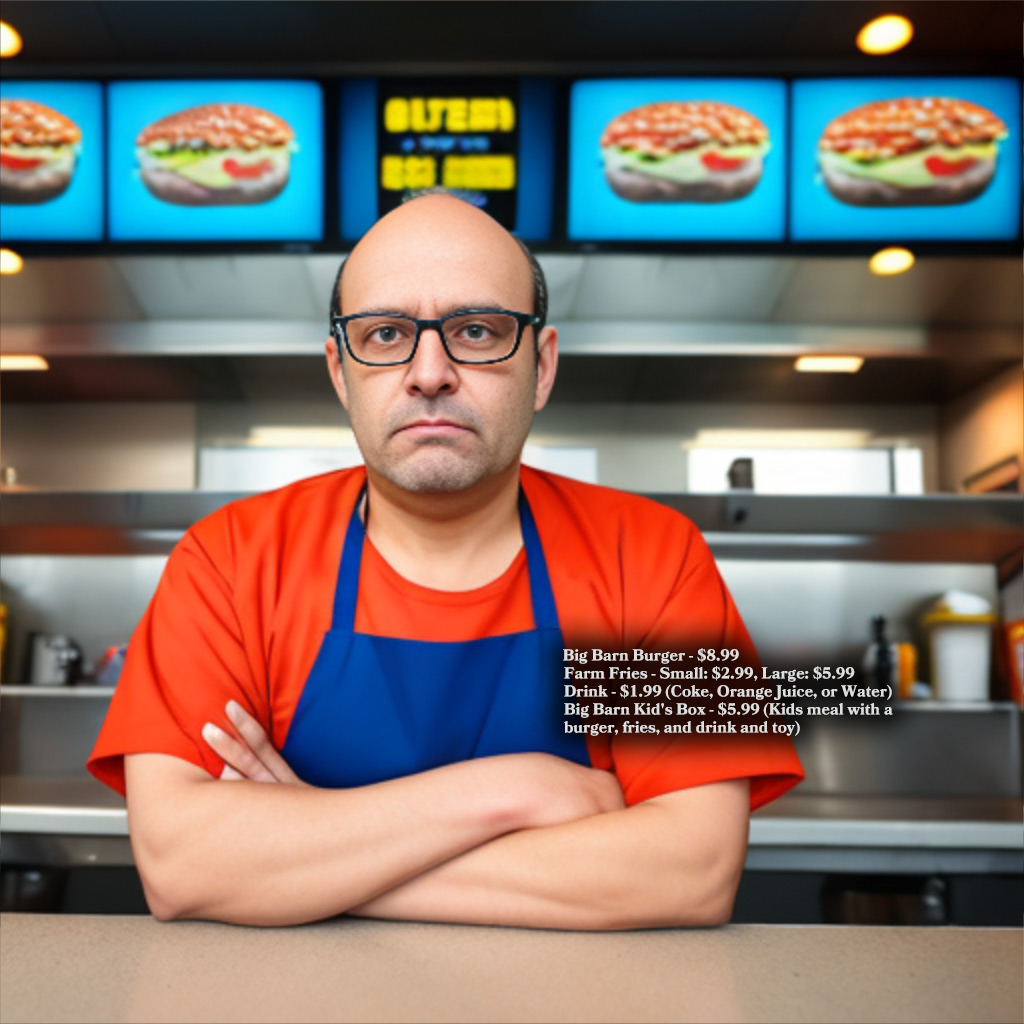
<style>
.page{position:relative;width:1024px;height:1024px}
.page>*{position:absolute;margin:0}
.t1{font:16px/18px "BookmaniaW02-Bold";color:#dedede}
</style>
<div class="page">
<p class="t1" style="left:563px;top:648px;width:330px;height:88px">Big Barn Burger - $8.99<br>Farm Fries - Small: $2.99, Large: $5.99<br>Drink - $1.99 (Coke, Orange Juice, or Water)<br>Big Barn Kid's Box - $5.99 (Kids meal with a burger, fries, and drink and toy)</p>
</div>
